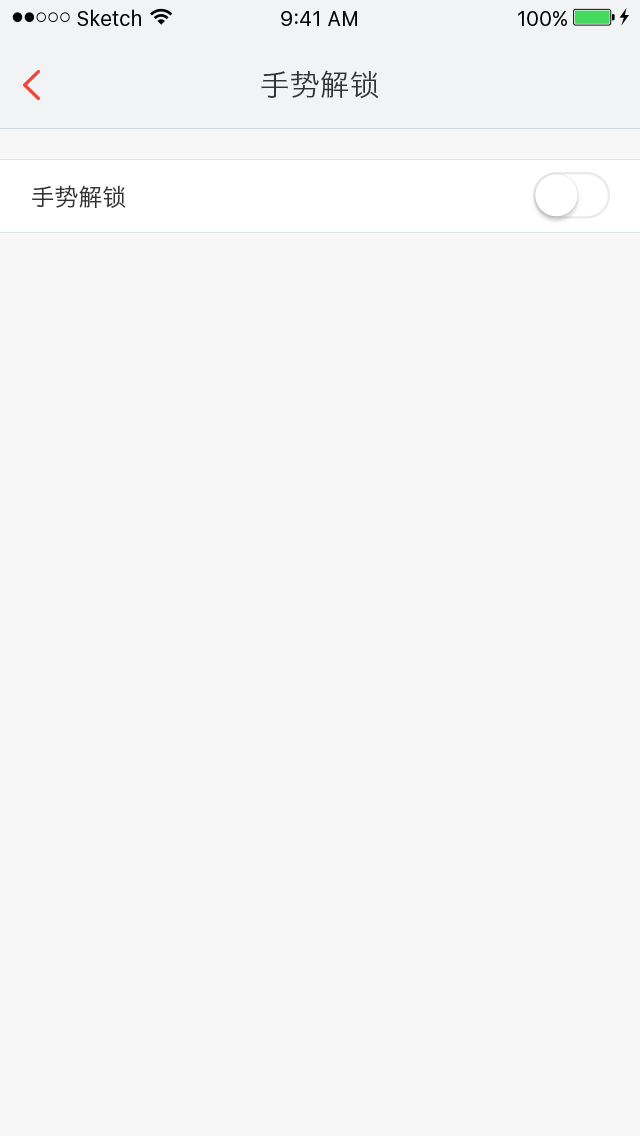
<style>
.page{position:relative;width:640px;height:1136px;background:#f7f7f7}
.page>*{position:absolute;margin:0}
.t1{font:30px "HiraginoSansGB-W3";color:#333333}
.t2{font:24px "HiraginoSansGB-W3";color:#333333}
</style>
<div class="page">
<p class="t1" style="left:261px;top:70px;width:118px;height:29px">手势解锁</p>
<p class="t2" style="left:32px;top:185px;width:94px;height:23px">手势解锁</p>
</div>
